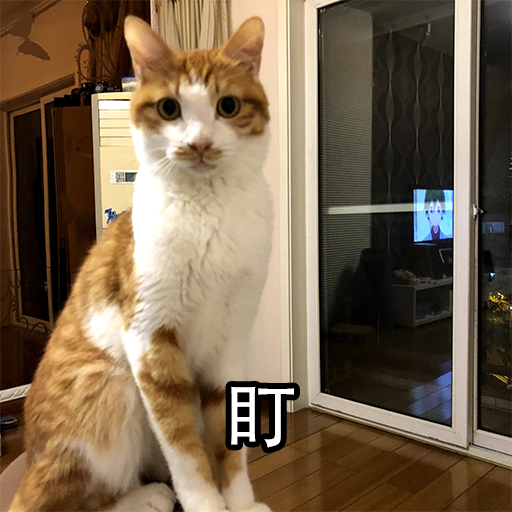
<style>
.page{position:relative;width:512px;height:512px}
.page>*{position:absolute;margin:0}
.t1{font:72px "AdobeHeitiStd-Regular";color:#ffffff}
</style>
<div class="page">
<p class="t1" style="left:231px;top:386px;width:63px;height:62px">盯</p>
</div>
